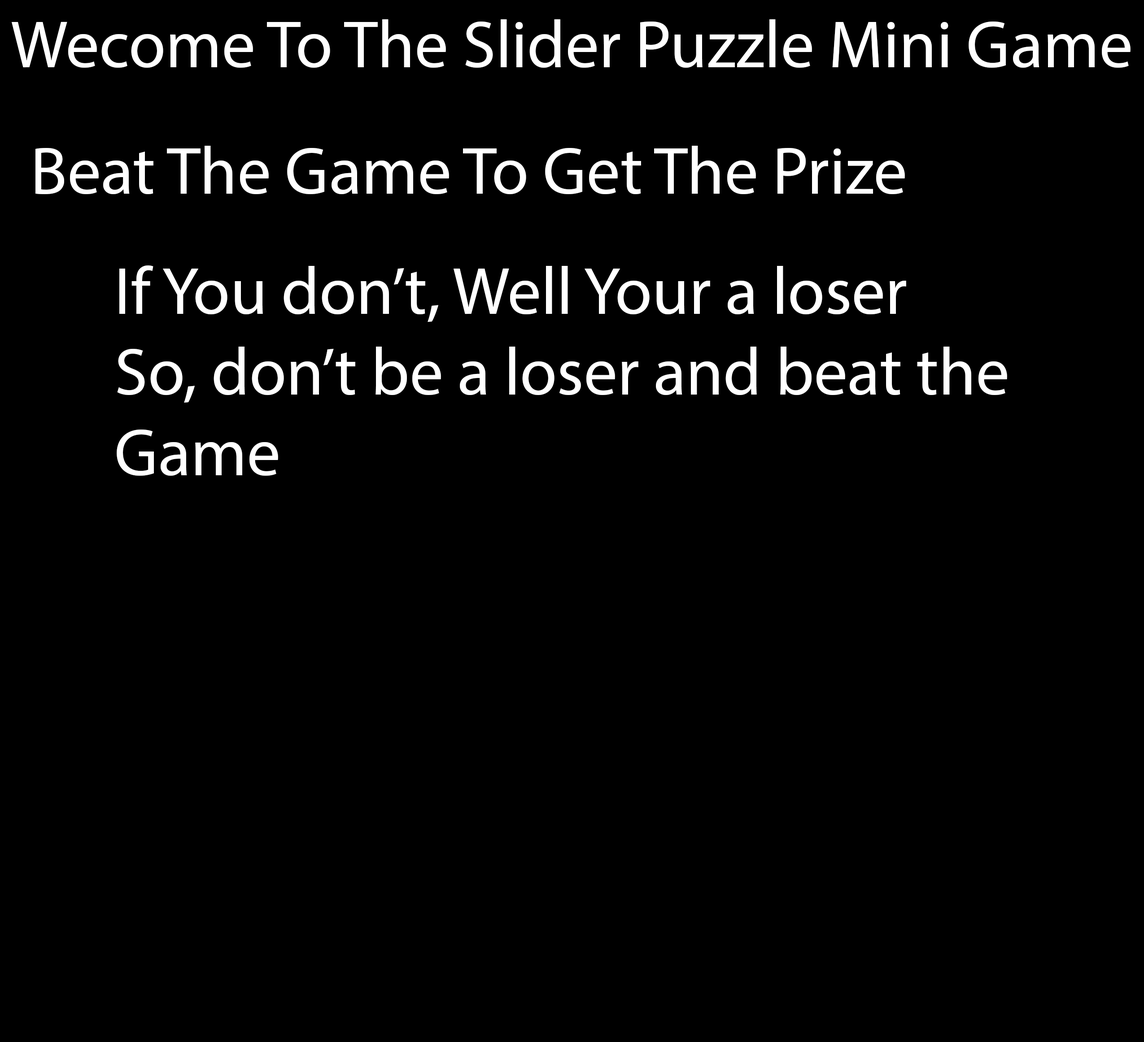
<style>
.page{position:relative;width:1144px;height:1042px;background:#000000}
.page>*{position:absolute;margin:0}
.t1{font:67.3px "MyriadPro-Regular";color:#ffffff}
</style>
<div class="page">
<p class="t1" style="left:12px;top:19px;width:1118px;height:49px">Wecome To The Slider Puzzle Mini Game</p>
<p class="t1" style="left:35px;top:146px;width:870px;height:49px">Beat The Game To Get The Prize</p>
<p class="t1" style="left:117px;top:265px;width:890px;height:211px">If You don’t, Well Your a loser<br>So, don’t be a loser and beat the <br>Game</p>
</div>
